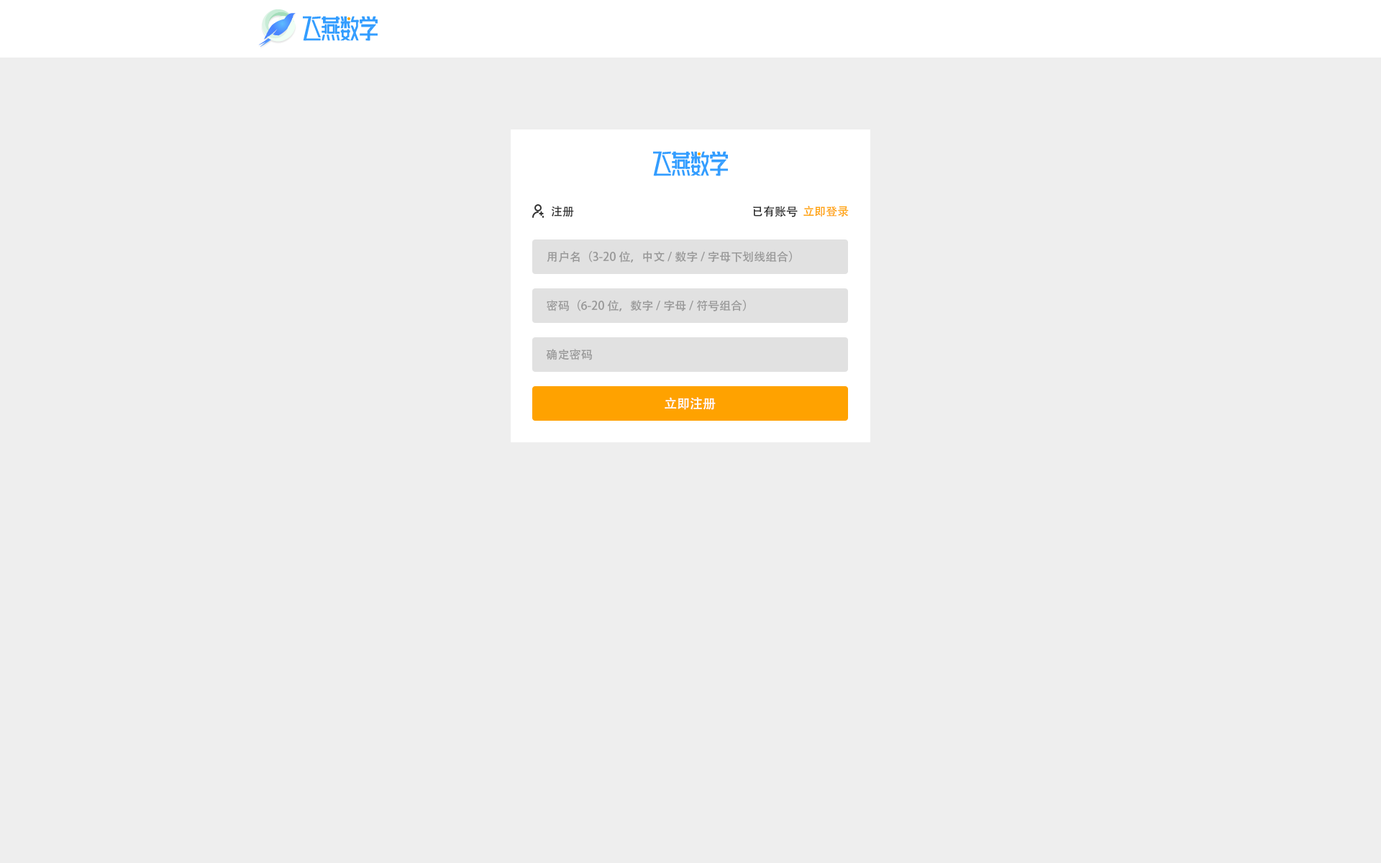
<style>
.page{position:relative;width:1381px;height:863px;background:#eeeeee}
.page>*{position:absolute;margin:0}
.t1{font:11.5px "AdobeHeitiStd-Regular";color:#333333}
.t2{font:11.5px "AdobeHeitiStd-Regular";color:#ffa200}
.t3{font:11.5px "AdobeHeitiStd-Regular";color:#999999}
.t4{font:12.9px "AdobeHeitiStd-Regular";color:#ffffff}
</style>
<div class="page">
<p class="t1" style="left:551px;top:206px;width:23px;height:11px">注册</p>
<p class="t1" style="left:753px;top:206px;width:96px;height:11px">已有账号  <span class="t2">立即登录</span></p>
<p class="t3" style="left:547px;top:251px;width:245px;height:12px">用户名（3-20位，中文/数字/字母下划线组合）</p>
<p class="t3" style="left:547px;top:300px;width:199px;height:12px">密码（6-20位，数字/字母/符号组合）</p>
<p class="t3" style="left:546px;top:349px;width:46px;height:11px">确定密码</p>
<p class="t4" style="left:665px;top:397px;width:51px;height:13px">立即注册</p>
</div>
